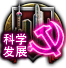
<style>
.page{position:relative;width:66px;height:68px}
.page>*{position:absolute;margin:0}
.t1{font:12.2px/12.1px "AdobeHeitiStd-Regular"}
.t2{font:12.2px/12.1px "AdobeHeitiStd-Regular";color:#ffffff}
</style>
<div class="page">
<p class="t1" style="left:2px;top:33px;width:24px;height:25px">科学<br>发展</p>
<p class="t2" style="left:3px;top:33px;width:24px;height:25px">科学<br>发展</p>
</div>
